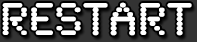
<style>
.page{position:relative;width:197px;height:42px;background:#333333}
.page>*{position:absolute;margin:0}
.t1{font:48px "SynchroLET";color:#ffffff}
</style>
<div class="page">
<p class="t1" style="left:2px;top:2px;width:190px;height:34px">RESTART</p>
</div>
